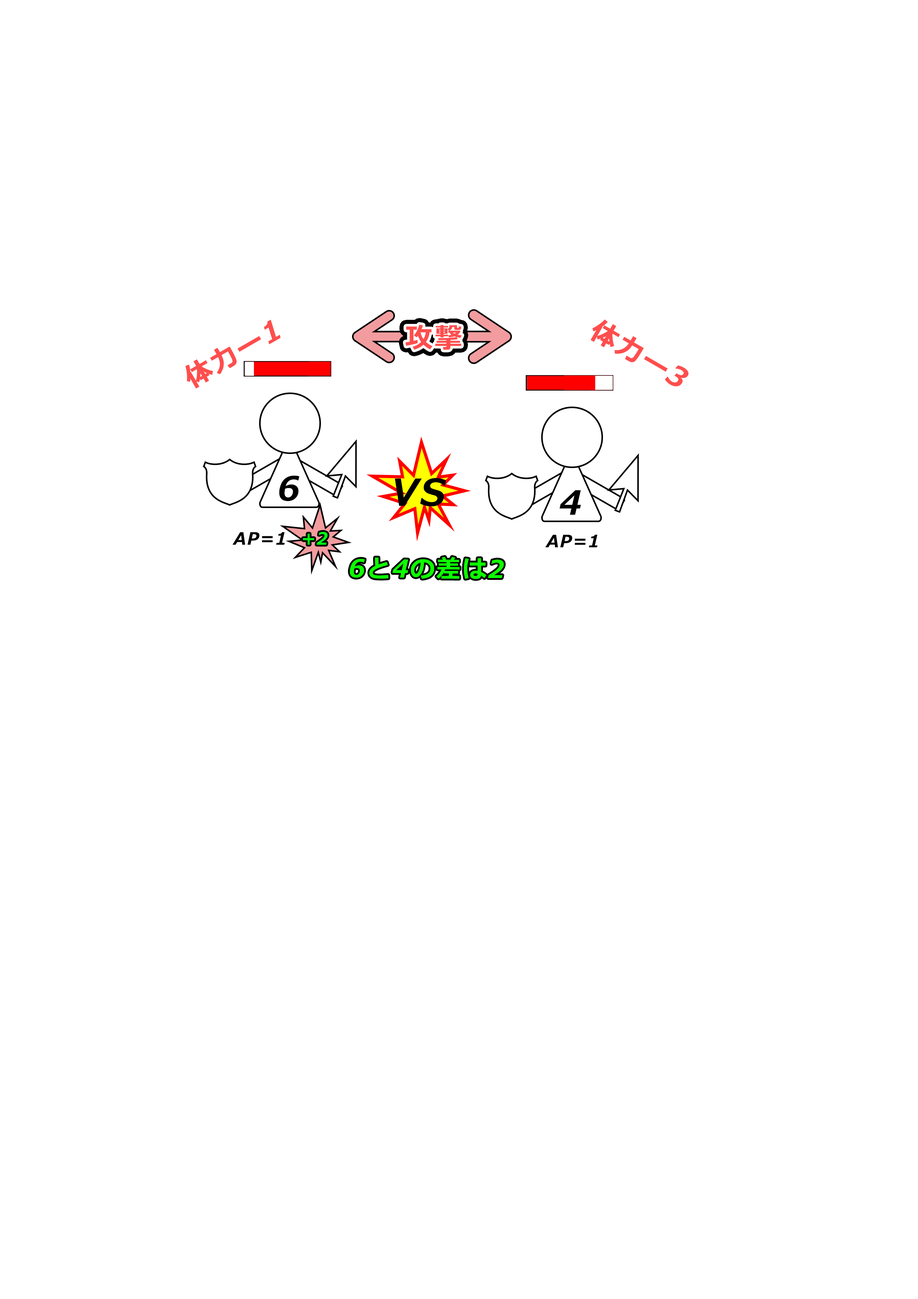
<style>
.page{position:relative;width:918px;height:1299px;background:#ffffff}
.page>*{position:absolute;margin:0}
.t1{font:27.8px "Meiryo-BoldItalic";letter-spacing:0.06em;color:#ff4e4e}
.t2{font:33.1px "Meiryo-BoldItalic";letter-spacing:0.06em;color:#000000}
.t3{font:37px "Meiryo-BoldItalic";letter-spacing:0.06em;color:#000000}
.t4{font:17px "Meiryo-BoldItalic";letter-spacing:0.06em;color:#000000}
.t5{font:17px "Meiryo-BoldItalic";letter-spacing:0.06em;color:#00ff12}
.t6{font:24.4px "Meiryo-BoldItalic";letter-spacing:0.06em;color:#0cff00}
</style>
<div class="page">
<p class="t1" style="left:185px;top:320px;width:96px;height:68px;rotate:-30deg">体力ー1</p>
<p class="t1" style="left:405px;top:324px;width:57px;height:26px">攻撃</p>
<p class="t1" style="left:591px;top:319px;width:98px;height:68px;rotate:30deg">体力ー3</p>
<p class="t2" style="left:279px;top:475px;width:21px;height:26px">6</p>
<p class="t3" style="left:395px;top:478px;width:51px;height:28px">VS</p>
<p class="t2" style="left:559px;top:490px;width:22px;height:25px">4</p>
<p class="t4" style="left:232px;top:532px;width:53px;height:13px">AP=1</p>
<p class="t5" style="left:303px;top:532px;width:25px;height:13px">+2</p>
<p class="t4" style="left:545px;top:535px;width:53px;height:12px">AP=1</p>
<p class="t6" style="left:350px;top:557px;width:154px;height:22px">6と4の差は2</p>
</div>
